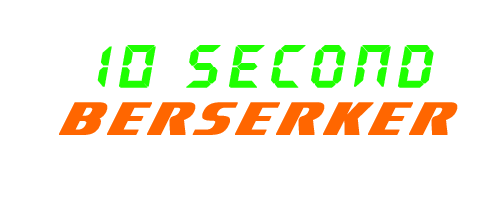
<style>
.page{position:relative;width:500px;height:200px;background:#ffffff}
.page>*{position:absolute;margin:0}
.t1{font:60px "QuartzMS";letter-spacing:0.075em;color:#1eff00;font-weight:bold;font-style:italic}
.t2{font:72px "Motorwerk";letter-spacing:0.075em;color:#ff6600;font-weight:bold;font-style:italic}
</style>
<div class="page">
<p class="t1" style="left:97px;top:45px;width:337px;height:43px">10 sECOND</p>
<p class="t2" style="left:59px;top:102px;width:399px;height:33px">berserker</p>
</div>
